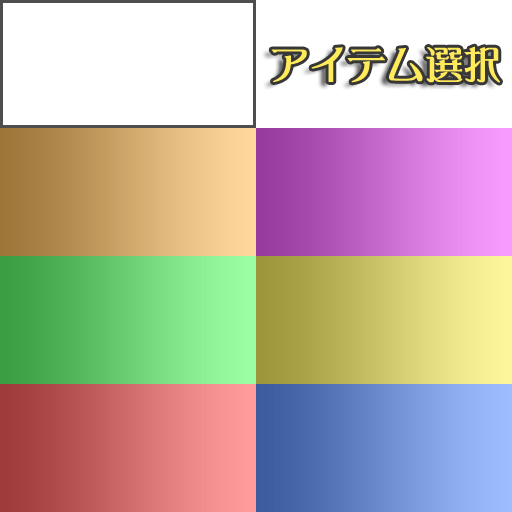
<style>
.page{position:relative;width:512px;height:512px;background:#ffffff}
.page>*{position:absolute;margin:0}
.t1{font:37.6px "DFLeiGaSo-W5-WIN-RKSJ-H";color:#ffea5c;font-weight:bold}
</style>
<div class="page">
<p class="t1" style="left:271px;top:46px;width:229px;height:37px">アイテム選択</p>
</div>
